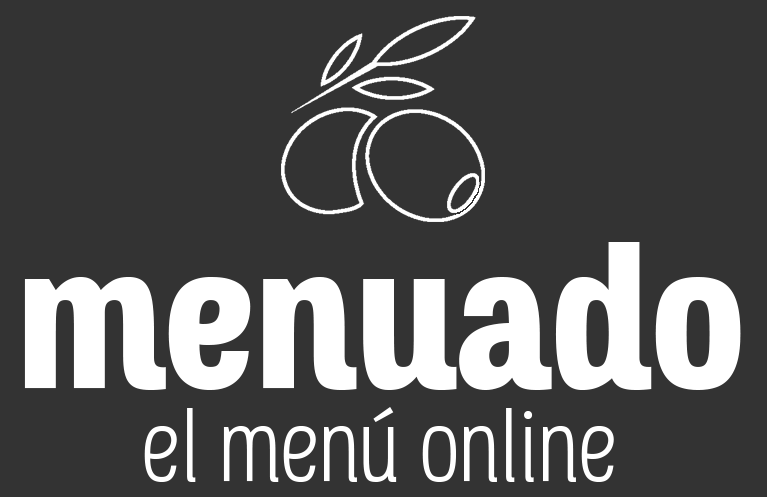
<style>
.page{position:relative;width:767px;height:497px;background:#333333}
.page>*{position:absolute;margin:0}
.t1{font:200px "Octagen-Black";letter-spacing:-0.025em;color:#ffffff}
.t2{font:100.3px "OctagenThin";letter-spacing:-0.025em;color:#ffffff}
</style>
<div class="page">
<p class="t1" style="left:24px;top:242px;width:717px;height:148px">menuado</p>
<p class="t2" style="left:144px;top:407px;width:470px;height:75px">el menú online</p>
</div>
